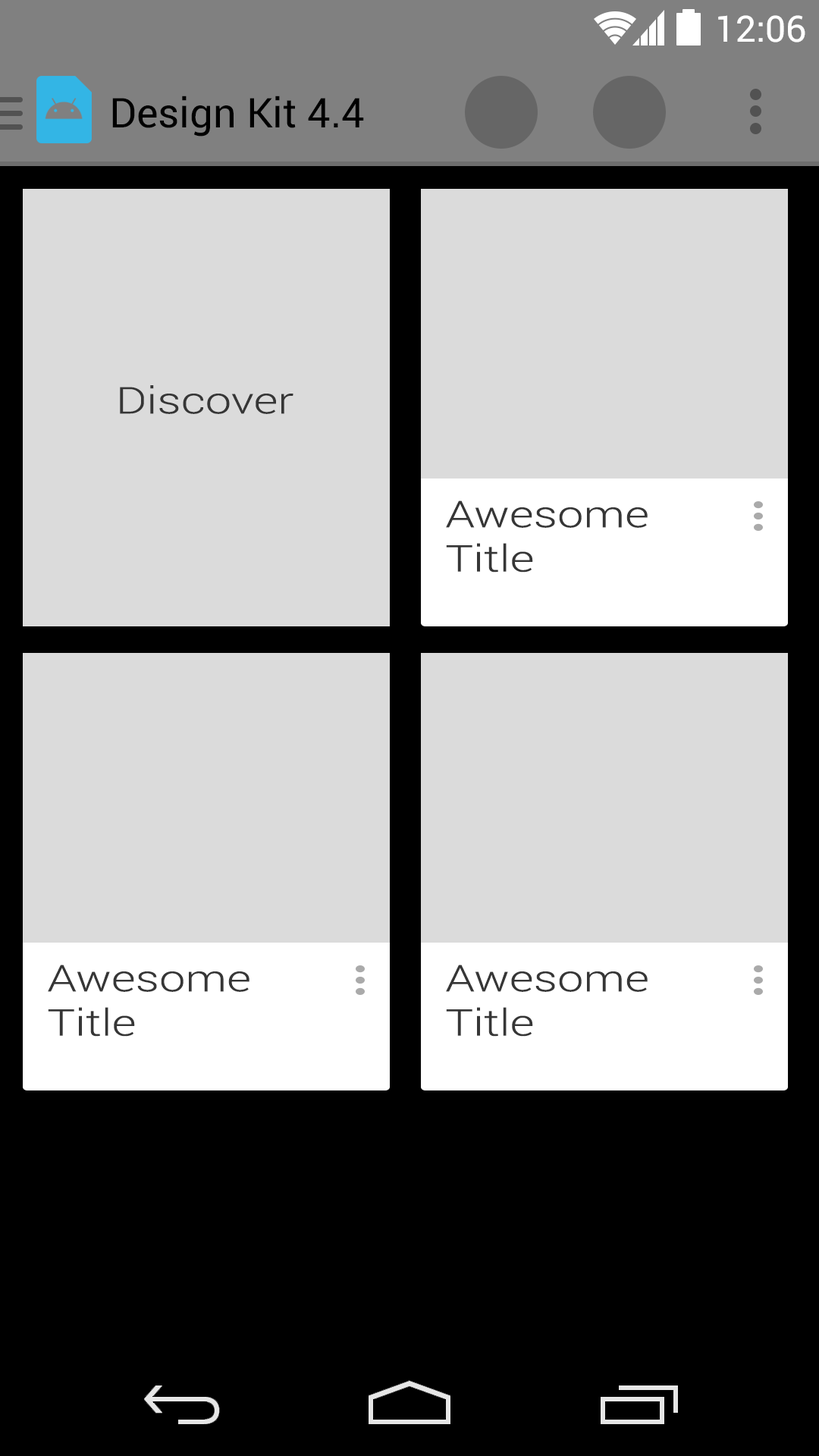
<style>
.page{position:relative;width:819px;height:1456px;background:#dbdbdb}
.page>*{position:absolute;margin:0}
.t1{font:36.4px "Roboto-Regular";color:#ffffff}
.t2{font:40.9px "Roboto-Regular";color:#000000}
.t3{font:36.9px "Roboto-Light";color:#363636;scale:1.27 1}
</style>
<div class="page">
<p class="t1" style="left:718px;top:15px;width:87px;height:27px">12:06</p>
<p class="t2" style="left:112px;top:96px;width:252px;height:40px">Design Kit 4.4</p>
<p class="t3" style="left:120px;top:385px;width:173px;height:29px">Discover</p>
<p class="t3" style="left:446px;top:500px;width:202px;height:73px">Awesome<br>Title</p>
<p class="t3" style="left:48px;top:965px;width:201px;height:72px">Awesome<br>Title</p>
<p class="t3" style="left:446px;top:965px;width:202px;height:72px">Awesome<br>Title</p>
</div>
